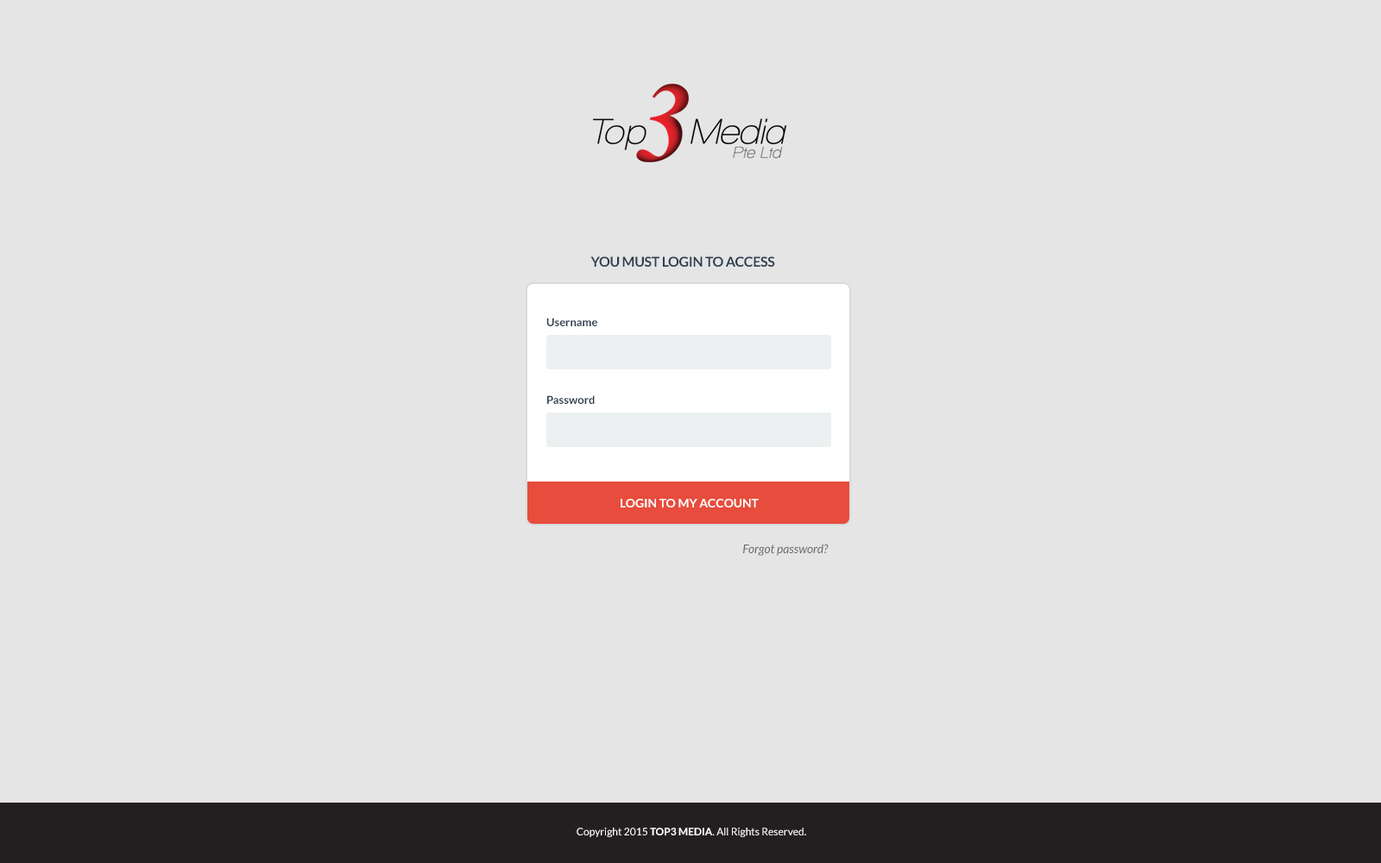
<style>
.page{position:relative;width:1381px;height:863px;background:#e5e5e5}
.page>*{position:absolute;margin:0}
.t1{font:13.8px "Lato-Bold";letter-spacing:-0.02em;color:#2d3e50;text-transform:uppercase}
.t2{font:11.2px "Lato-Bold";color:#2d3e50}
.t3{font:12.1px "Lato-Bold";color:#ffffff;text-transform:uppercase}
.t4{font:12.1px "Lato-Italic";color:#666666}
.t5{font:10.4px "Lato-Regular";color:#ffffff}
.t6{font:10.4px "Lato-Bold";color:#ffffff;text-transform:uppercase}
</style>
<div class="page">
<p class="t1" style="left:590px;top:256px;width:185px;height:11px">you must login to access</p>
<p class="t2" style="left:546px;top:318px;width:51px;height:8px">Username</p>
<p class="t2" style="left:547px;top:395px;width:48px;height:9px">Password</p>
<p class="t3" style="left:621px;top:499px;width:138px;height:9px">login to my account</p>
<p class="t4" style="left:743px;top:544px;width:86px;height:12px">Forgot password?</p>
<p class="t5" style="left:577px;top:828px;width:229px;height:9px">Copyright 2015 <span class="t6">Top3 Media</span>. All Rights Reserved.</p>
</div>
